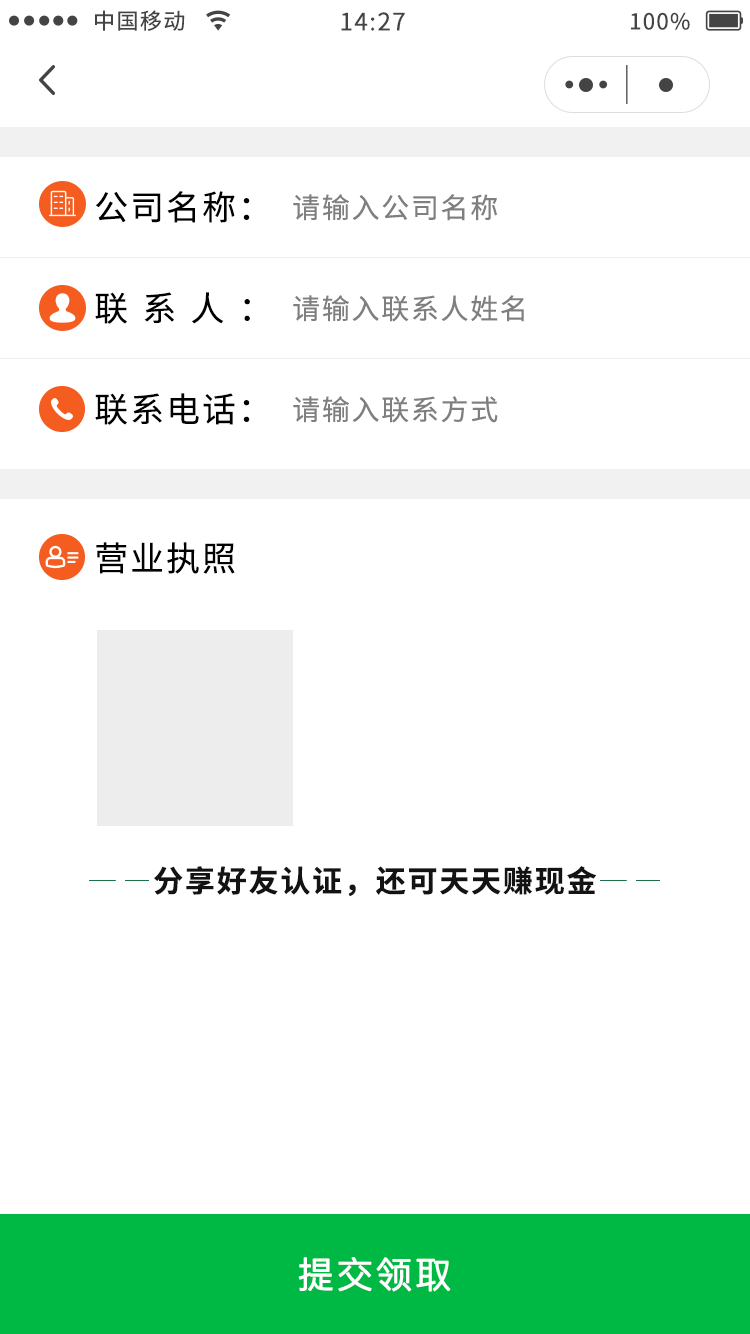
<style>
.page{position:relative;width:750px;height:1334px;background:#ffffff}
.page>*{position:absolute;margin:0}
.t1{font:22px "NotoSansCJKsc-Regular";letter-spacing:0.06em;color:#444444}
.t2{font:24px "NotoSansCJKsc-Regular";letter-spacing:0.06em;color:#444444}
.t3{font:34px "NotoSansCJKsc-Regular";letter-spacing:0.06em;color:#000000}
.t4{font:28px "NotoSansCJKsc-Regular";letter-spacing:0.06em;color:#7f7f7f}
.t5{font:34px "NotoSansCJKsc-Regular";letter-spacing:0.42em;color:#000000}
.t6{font:34px "NotoSansCJKsc-Regular";letter-spacing:0.48em;color:#000000}
.t7{font:30px "NotoSansCJKsc-Bold";letter-spacing:0.06em;color:#131313}
.t8{font:36px "PingFang-SC-Regular";letter-spacing:0.06em;color:#ffffff;font-weight:bold}
</style>
<div class="page">
<p class="t1" style="left:95px;top:10px;width:90px;height:21px">中国移动</p>
<p class="t2" style="left:341px;top:12px;width:64px;height:19px">14:27</p>
<p class="t1" style="left:631px;top:12px;width:59px;height:18px">100%</p>
<p class="t3" style="left:96px;top:191px;width:154px;height:32px">公司名称：</p>
<p class="t4" style="left:293px;top:194px;width:204px;height:27px">请输入公司名称</p>
<p class="t5" style="left:95px;top:292px;width:155px;height:32px">联系人<span class="t6">：</span></p>
<p class="t4" style="left:293px;top:295px;width:231px;height:27px">请输入联系人姓名</p>
<p class="t3" style="left:95px;top:393px;width:155px;height:32px">联系电话：</p>
<p class="t4" style="left:293px;top:396px;width:205px;height:27px">请输入联系方式</p>
<p class="t3" style="left:96px;top:542px;width:139px;height:32px">营业执照</p>
<p class="t7" style="left:154px;top:866px;width:443px;height:31px">分享好友认证，还可天天赚现金</p>
<p class="t8" style="left:298px;top:1257px;width:153px;height:35px">提交领取</p>
</div>
